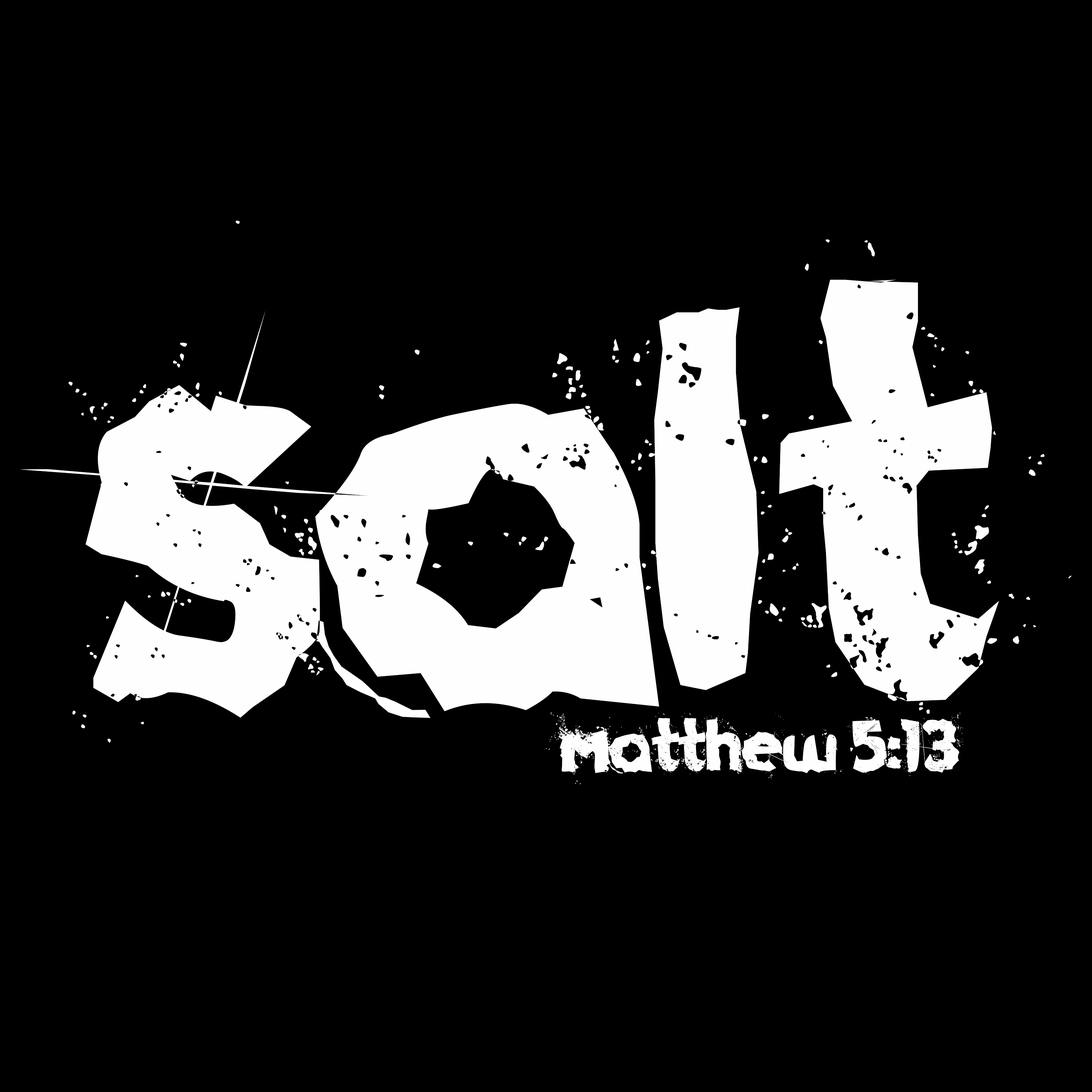
<style>
.page{position:relative;width:1092px;height:1092px;background:#000000}
.page>*{position:absolute;margin:0}
.t1{font:570.5px "Funkrocker";color:#fefefe}
.t2{font:72.2px "Funkrocker";color:#fefefe}
</style>
<div class="page">
<p class="t1" style="left:20px;top:221px;width:1052px;height:531px">salt</p>
<p class="t2" style="left:546px;top:712px;width:417px;height:72px">Matthew 5:13</p>
</div>
